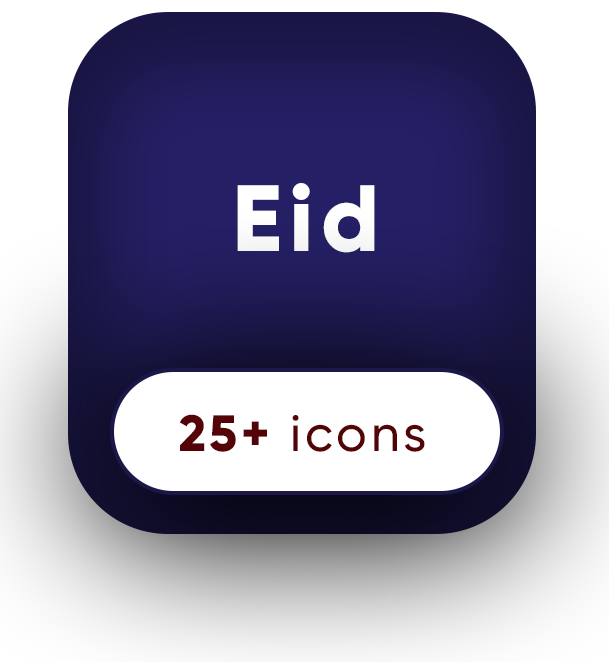
<style>
.page{position:relative;width:609px;height:662px;background:#ffffff}
.page>*{position:absolute;margin:0}
.t1{font:93.8px "Gilroy-ExtraBold";letter-spacing:0.075em;color:#fdfdfd}
.t2{font:50.9px "Gilroy-Medium";letter-spacing:0.075em;color:#540306}
.t3{font:50.9px "Gilroy-ExtraBold";letter-spacing:0.075em;color:#540306}
</style>
<div class="page">
<p class="t1" style="left:237px;top:183px;width:138px;height:70px">Eid</p>
<p class="t2" style="left:179px;top:414px;width:246px;height:38px"><span class="t3">25+ </span>icons</p>
</div>
